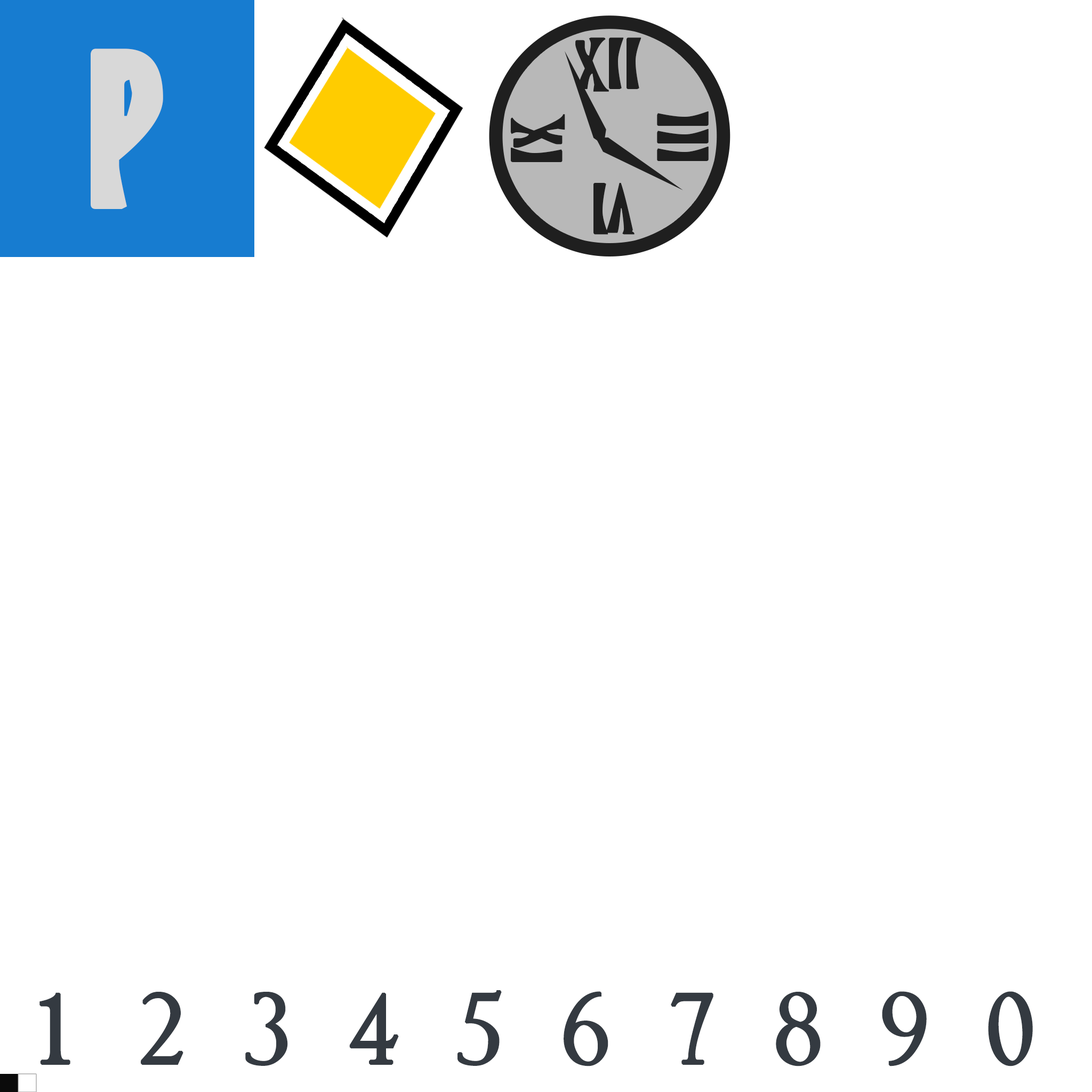
<style>
.page{position:relative;width:1092px;height:1092px;background:#ffffff}
.page>*{position:absolute;margin:0}
.t1{font:66.2px "hosteltransilvania";letter-spacing:0.05em;color:#1f1f1f}
.t2{font:204.5px "hosteltransilvania";letter-spacing:0.05em;color:#d8d8d8}
.t3{font:99px "hosteltransilvania";color:#343a41;text-transform:uppercase;font-weight:bold}
</style>
<div class="page">
<p class="t1" style="left:575px;top:37px;width:66px;height:55px">xii</p>
<p class="t2" style="left:91px;top:49px;width:72px;height:160px">P</p>
<p class="t1" style="left:657px;top:111px;width:52px;height:50px;rotate:-90deg">iii</p>
<p class="t1" style="left:510px;top:114px;width:55px;height:48px;rotate:-90deg">ix</p>
<p class="t1" style="left:593px;top:183px;width:42px;height:52px">iv</p>
<p class="t3" style="left:39px;top:990px;width:994px;height:76px">1  2  3  4  5  6  7  8  9  0</p>
</div>
